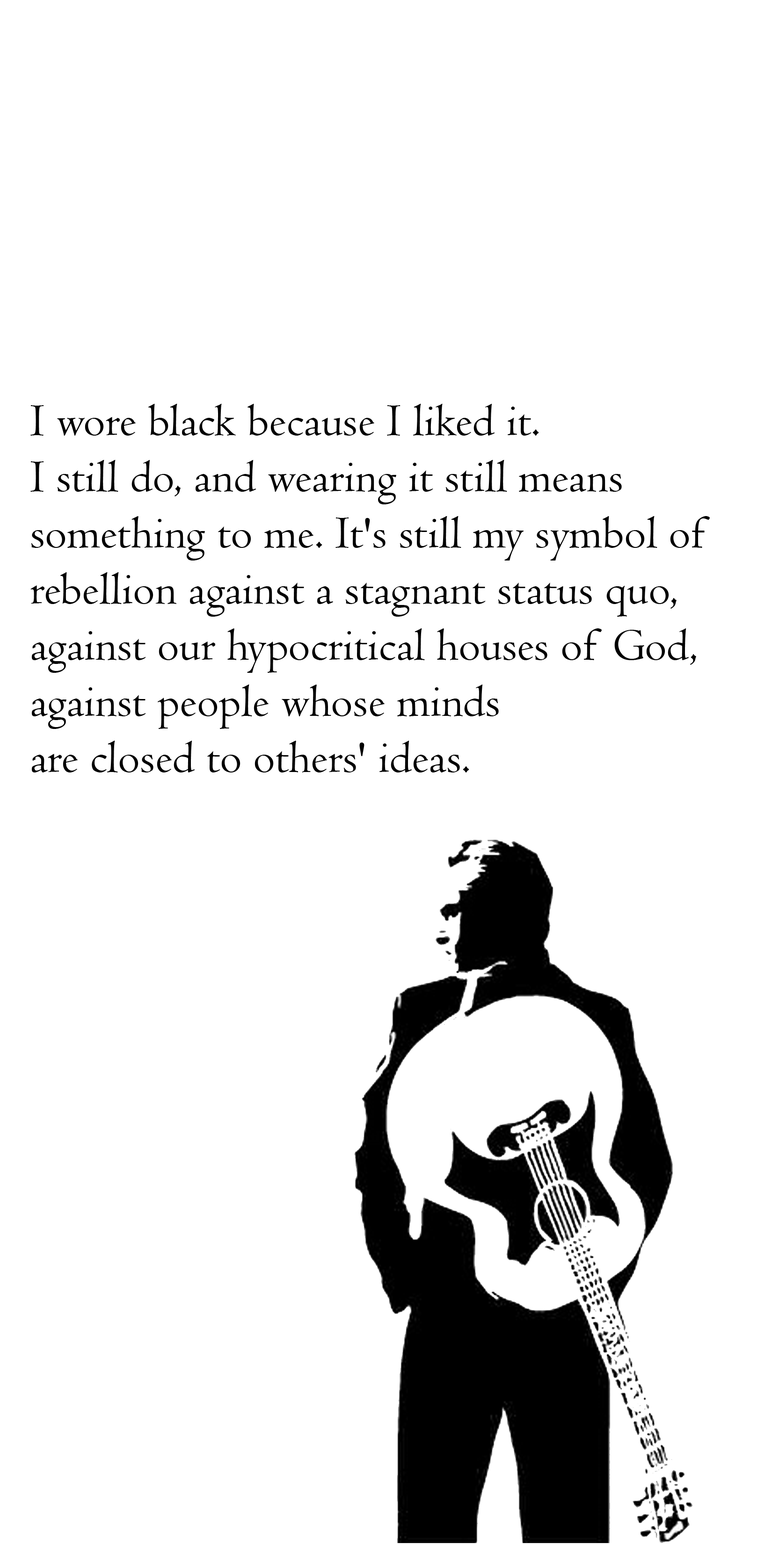
<style>
.page{position:relative;width:772px;height:1544px;background:#ffffff}
.page>*{position:absolute;margin:0}
.t1{font:46.8px "Centaur";color:#000000}
</style>
<div class="page">
<p class="t1" style="left:30px;top:404px;width:680px;height:369px">I wore black because I liked it. <br>I still do, and wearing it still means <br>something to me. It's still my symbol of <br>rebellion against a stagnant status quo,<br>against our hypocritical houses of God, <br>against people whose minds <br>are closed to others' ideas.</p>
</div>
